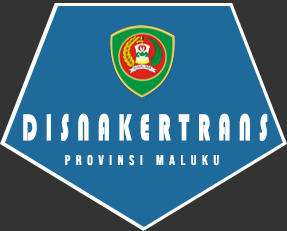
<style>
.page{position:relative;width:287px;height:231px;background:#1d6a9b}
.page>*{position:absolute;margin:0}
.t1{font:38.8px "Bauhaus93";letter-spacing:0.4em;color:#ffffff;scale:0.53 1}
.t2{font:14px "BebasNeue-Regular";letter-spacing:0.4em;color:#ffffff}
</style>
<div class="page">
<p class="t1" style="left:23px;top:113px;width:245px;height:28px">DISNAKERTRANS</p>
<p class="t2" style="left:65px;top:155px;width:154px;height:11px">Provinsi Maluku</p>
</div>
